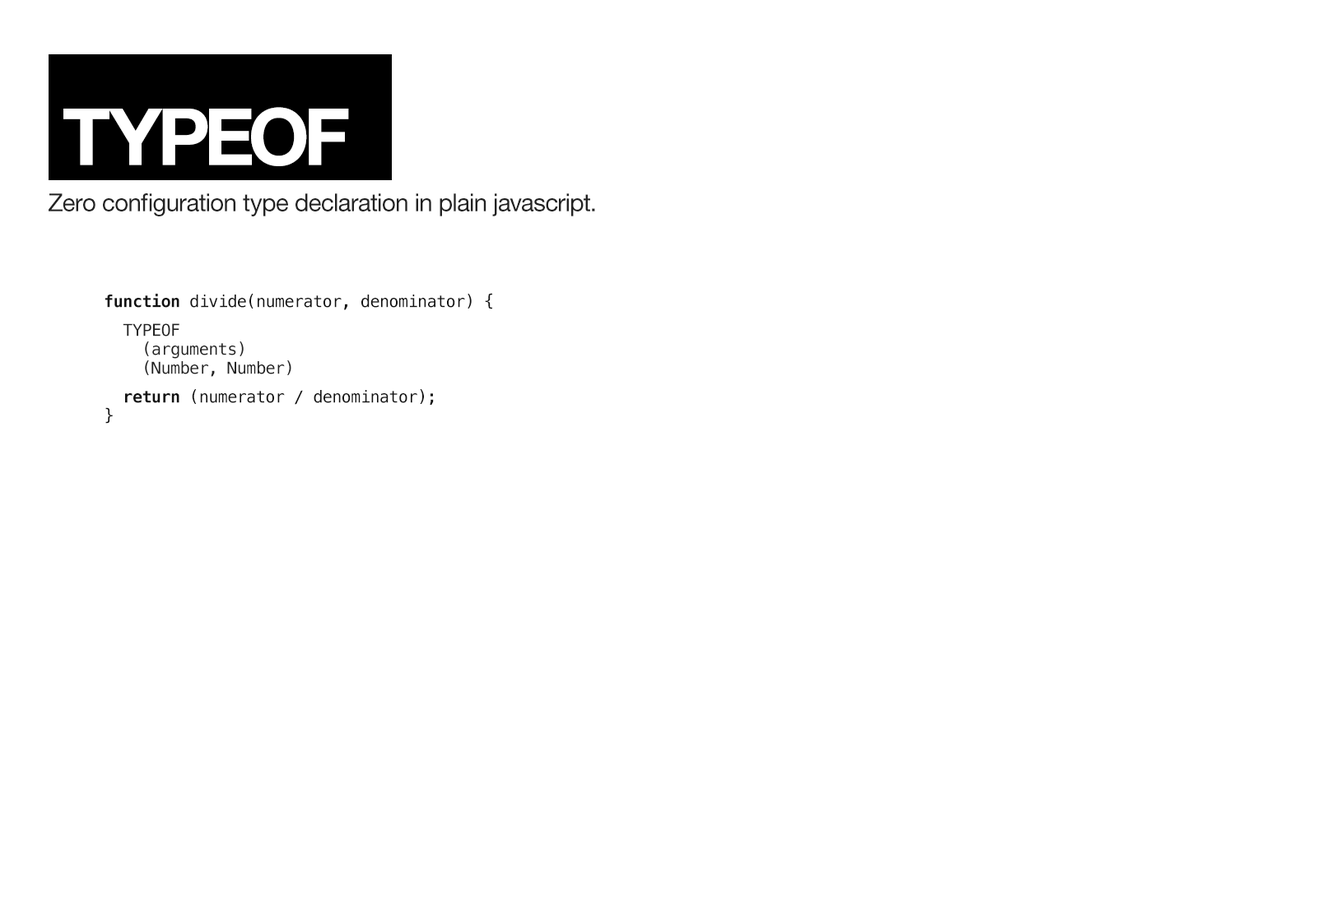
<style>
.page{position:relative;width:1317px;height:905px;background:#ffffff}
.page>*{position:absolute;margin:0}
.t1{font:79px "HelveticaNeueLTStd-Bd";letter-spacing:-0.05em;color:#ffffff}
.t2{font:79px "HelveticaNeueLTStd-Bd";letter-spacing:-0.04em;color:#ffffff}
.t3{font:79px "HelveticaNeueLTStd-Bd";letter-spacing:-0.065em;color:#ffffff}
.t4{font:24.7px "HelveticaNeueLTStd-Roman";letter-spacing:-0.025em;color:#222222}
.t5{font:16.5px/18.9px "Menlo-Regular";letter-spacing:-0.025em;color:#222222}
.t6{font:16.5px/18.9px "Menlo-Bold";letter-spacing:-0.025em;color:#111111}
.t7{font:16.5px/18.9px "Menlo-Regular";letter-spacing:-0.025em;color:#111111}
</style>
<div class="page">
<p class="t1" style="left:63px;top:107px;width:286px;height:59px"><span class="t2">T</span>YP<span class="t3">EO</span>F</p>
<p class="t4" style="left:49px;top:193px;width:546px;height:23px">Zero configuration type declaration in plain javascript.</p>
<p class="t5" style="left:105px;top:293px;width:387px;height:131px"><span class="t6">function </span><span class="t7">divide(numerator, denominator) {<br>  </span>TYPEOF<br>    (arguments)<br>    (Number, Number)<br>  <span class="t6">return</span><span class="t7"> (numerator / denominator);<br>}</span></p>
</div>
